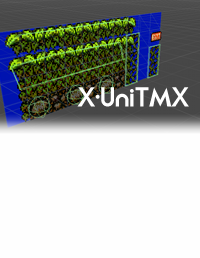
<style>
.page{position:relative;width:200px;height:258px;background:#fefefe}
.page>*{position:absolute;margin:0}
.t1{font:24px "Moderna";color:#ffffff}
</style>
<div class="page">
<p class="t1" style="left:77px;top:87px;width:112px;height:20px">X-UniTMX</p>
</div>
